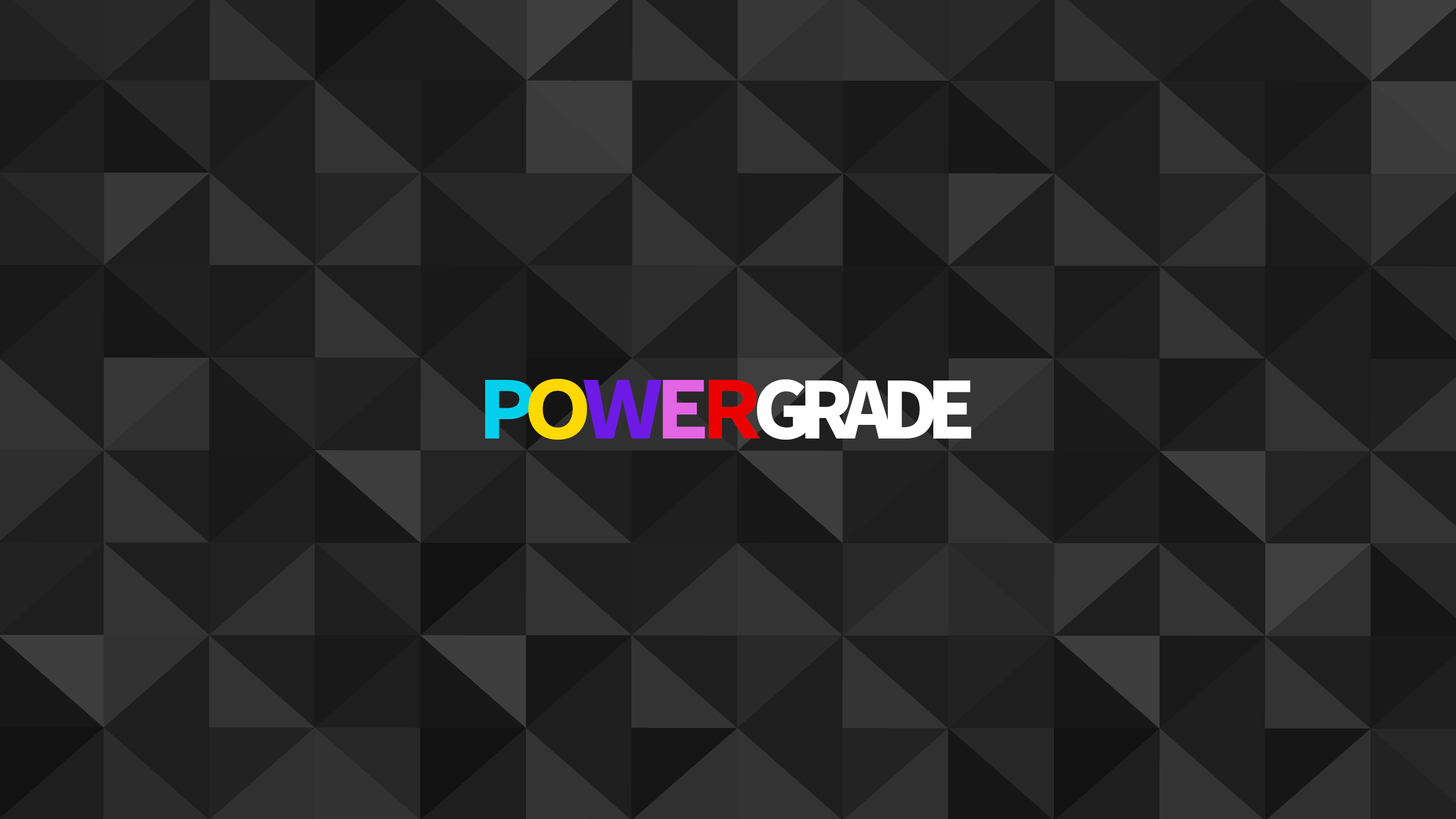
<style>
.page{position:relative;width:1456px;height:819px;background:#1e1e1e}
.page>*{position:absolute;margin:0}
.t1{font:78.2px "NotoSansCJKtc-Black";letter-spacing:-0.15em;color:#ffffff}
.t2{font:78.2px "NotoSansCJKtc-Black";letter-spacing:-0.15em;color:#01cfec}
.t3{font:78.2px "NotoSansCJKtc-Black";letter-spacing:-0.15em;color:#ffd900}
.t4{font:78.2px "NotoSansCJKtc-Black";letter-spacing:-0.15em;color:#6e1ae6}
.t5{font:78.2px "NotoSansCJKtc-Black";letter-spacing:-0.15em;color:#e265e4}
.t6{font:78.2px "NotoSansCJKtc-Black";letter-spacing:-0.15em;color:#ec0101}
</style>
<div class="page">
<p class="t1" style="left:485px;top:379px;width:486px;height:61px"><span class="t2">P</span><span class="t3">O</span><span class="t4">W</span><span class="t5">E</span><span class="t6">R</span>GRADE</p>
</div>
